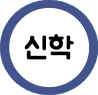
<style>
.page{position:relative;width:98px;height:95px;background:#ffffff}
.page>*{position:absolute;margin:0}
.t1{font:30px "BMJUA";color:#000000}
</style>
<div class="page">
<p class="t1" style="left:24px;top:34px;width:50px;height:26px">신학</p>
</div>
